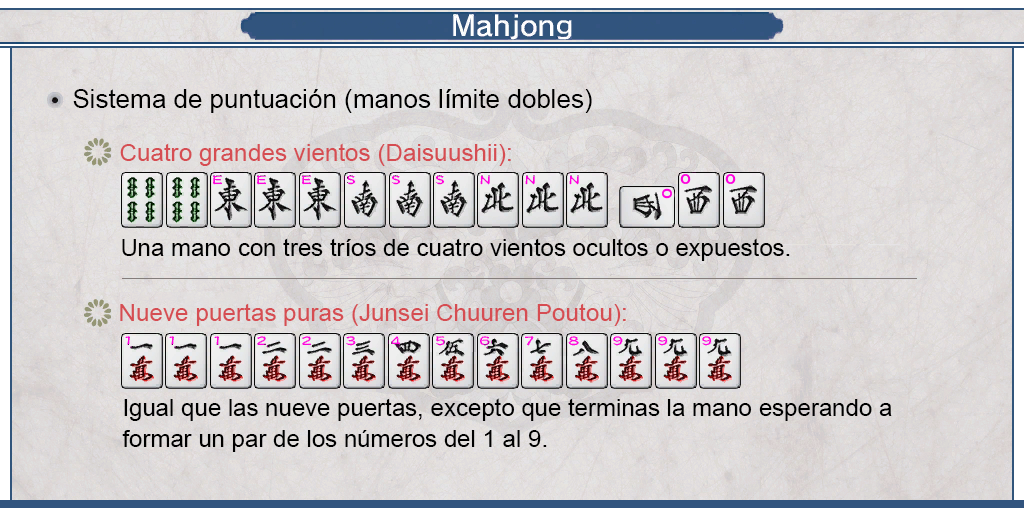
<style>
.page{position:relative;width:1024px;height:512px}
.page>*{position:absolute;margin:0}
.t1{font:26px "ArialMT";color:#000000}
.t2{font:24px "ArialMT";color:#d64d52}
.t3{font:24px "ArialMT";color:#000000}
.t4{font:24px/31px "ArialMT";color:#000000}
</style>
<div class="page">
<p class="t1" style="left:73px;top:89px;width:519px;height:24px">Sistema de puntuación (manos límite dobles)</p>
<p class="t2" style="left:120px;top:143px;width:391px;height:23px">Cuatro grandes vientos (Daisuushii):</p>
<p class="t3" style="left:122px;top:238px;width:668px;height:23px">Una mano con tres tríos de cuatro vientos ocultos o expuestos.</p>
<p class="t2" style="left:120px;top:303px;width:506px;height:23px">Nueve puertas puras (Junsei Chuuren Poutou):</p>
<p class="t4" style="left:122px;top:398px;width:770px;height:54px;text-align:justify">Igual que las nueve puertas, excepto que terminas la mano esperando a <br>formar un par de los números del 1 al 9.</p>
</div>
